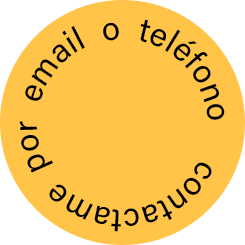
<style>
.page{position:relative;width:245px;height:245px;background:#ffc448}
.page>*{position:absolute;margin:0}
.t1{font:32.9px "AcuminConcept-Regular";color:#000000;font-weight:bold}
</style>
<div class="page">
<p class="t1" style="left:19px;top:19px;width:206px;height:213px;text-align:center">contactame  por  email  o  teléfono</p>
</div>
